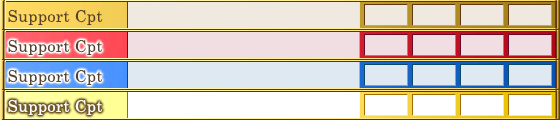
<style>
.page{position:relative;width:560px;height:120px}
.page>*{position:absolute;margin:0}
.t1{font:16px "CenturySchoolbook";letter-spacing:0.025em;color:#57422d}
.t2{font:16px "CenturySchoolbook";letter-spacing:0.025em;color:#ffffff}
</style>
<div class="page">
<p class="t1" style="left:8px;top:9px;width:95px;height:16px">Support Cpt</p>
<p class="t1" style="left:8px;top:39px;width:95px;height:16px">Support Cpt</p>
<p class="t1" style="left:8px;top:69px;width:95px;height:16px">Support Cpt</p>
<p class="t2" style="left:8px;top:99px;width:95px;height:16px">Support Cpt</p>
</div>
